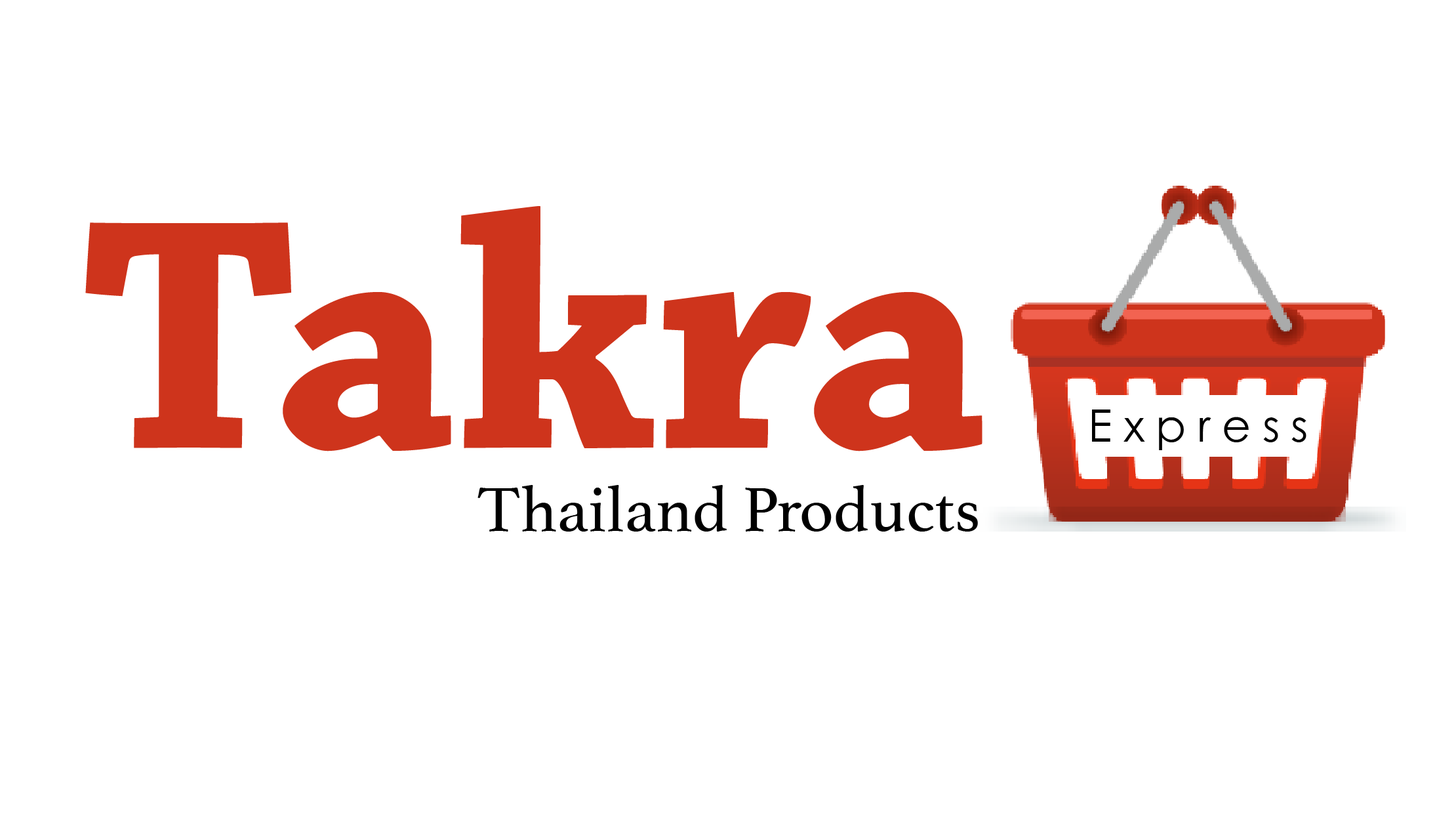
<style>
.page{position:relative;width:1456px;height:819px;background:#ffffff}
.page>*{position:absolute;margin:0}
.t1{font:345.5px "ChaparralPro-Bold";color:#ce341c}
.t2{font:44.7px "STHeitiSC-Light";color:#000000}
.t3{font:65.6px "Athelas-Regular";color:#000000}
</style>
<div class="page">
<p class="t1" style="left:85px;top:206px;width:898px;height:245px">Takra</p>
<p class="t2" style="left:1092px;top:409px;width:215px;height:41px">E x p r e s s</p>
<p class="t3" style="left:478px;top:485px;width:500px;height:46px">Thailand Products</p>
</div>
